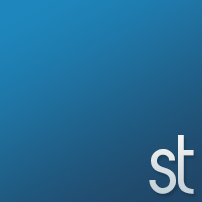
<style>
.page{position:relative;width:202px;height:202px}
.page>*{position:absolute;margin:0}
.t1{font:75px "AbeatbyKai";letter-spacing:-0.05em;color:#d8dfe3}
</style>
<div class="page">
<p class="t1" style="left:149px;top:135px;width:45px;height:59px">st</p>
</div>
